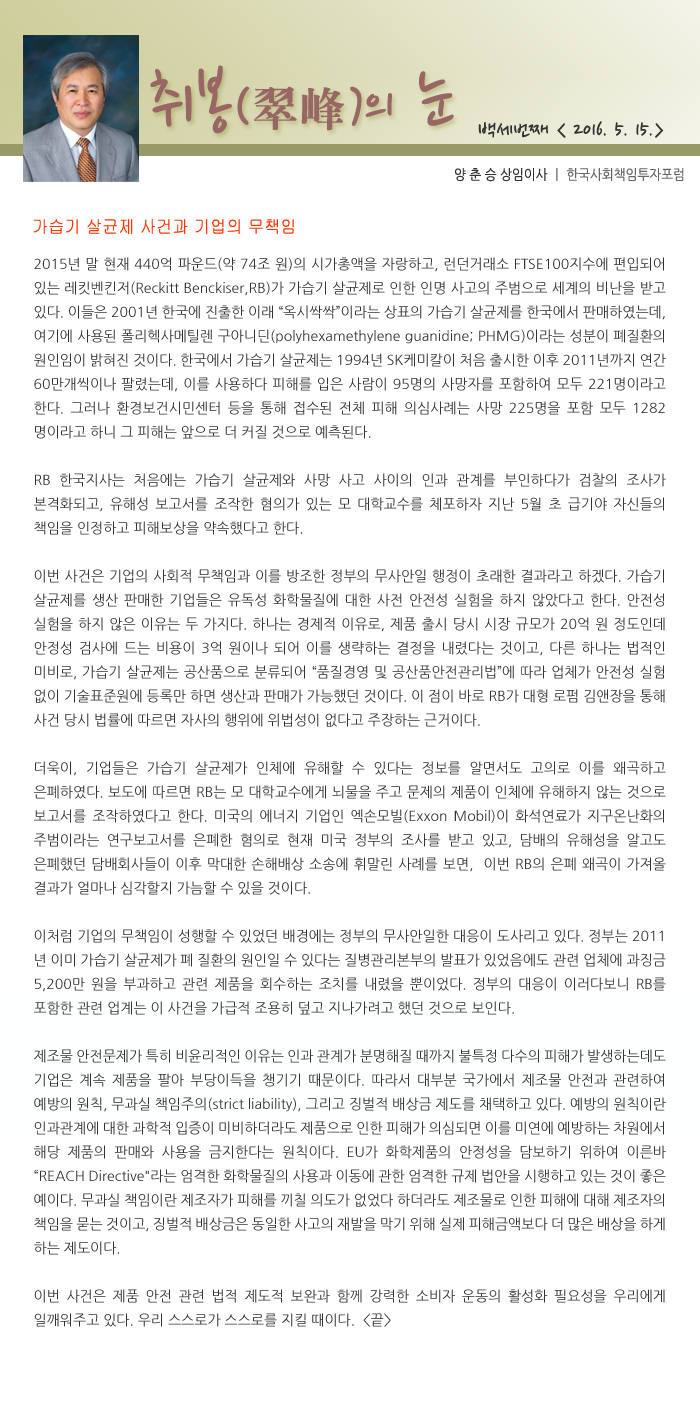
<style>
.page{position:relative;width:700px;height:1417px;background:#ffffff}
.page>*{position:absolute;margin:0}
.t1{font:77.5px "NanumPen";color:#996666}
.t2{font:60px "NanumPen";color:#996666}
.t3{font:48px "H2mjrE";color:#996666}
.t4{font:24px "NanumPen";color:#333333}
.t5{font:14px "NanumGothic";color:#666666;scale:0.9 1}
.t6{font:14px "NanumGothic";color:#333333;scale:0.9 1}
.t7{font:18px "Gulim";color:#ff3300;scale:0.9 1}
.t8{font:14px/24px "NanumGothic";color:#333333}
</style>
<div class="page">
<p class="t1" style="left:150px;top:65px;width:304px;height:69px">취봉<span class="t2">(</span><span class="t3">翠峰</span><span class="t2">)</span><span class="t2">의</span> 눈</p>
<p class="t4" style="left:478px;top:121px;width:186px;height:17px">백세번째 &lt; 2016. 5. 15.&gt;</p>
<p class="t5" style="left:455px;top:168px;width:229px;height:14px"><span class="t6">양 춘 승 상임이사 </span>ㅣ 한국사회책임투자포럼</p>
<p class="t7" style="left:33px;top:219px;width:261px;height:15px">가습기 살균제 사건과 기업의 무책임</p>
<p class="t8" style="left:34px;top:257px;width:632px;height:1070px;text-align:justify">2015년 말 현재 440억 파운드(약 74조 원)의 시가총액을 자랑하고, 런던거래소 FTSE100지수에 편입되어 있는 레킷벤킨저(Reckitt Benckiser,RB)가 가습기 살균제로 인한 인명 사고의 주범으로 세계의 비난을 받고 있다. 이들은 2001년 한국에 진출한 이래 “옥시싹싹”이라는 상표의 가습기 살균제를 한국에서 판매하였는데, 여기에 사용된 폴리헥사메틸렌 구아니딘(polyhexamethylene guanidine; PHMG)이라는 성분이 폐질환의 원인임이 밝혀진 것이다. 한국에서 가습기 살균제는 1994년 SK케미칼이 처음 출시한 이후 2011년까지 연간 60만개씩이나 팔렸는데, 이를 사용하다 피해를 입은 사람이 95명의 사망자를 포함하여 모두 221명이라고 한다. 그러나 환경보건시민센터 등을 통해 접수된 전체 피해 의심사례는 사망 225명을 포함 모두 1282명이라고 하니 그 피해는 앞으로 더 커질 것으로 예측된다.<br><br>RB 한국지사는 처음에는 가습기 살균제와 사망 사고 사이의 인과 관계를 부인하다가 검찰의 조사가 본격화되고, 유해성 보고서를 조작한 혐의가 있는 모 대학교수를 체포하자 지난 5월 초 급기야 자신들의 책임을 인정하고 피해보상을 약속했다고 한다. <br><br>이번 사건은 기업의 사회적 무책임과 이를 방조한 정부의 무사안일 행정이 초래한 결과라고 하겠다. 가습기 살균제를 생산 판매한 기업들은 유독성 화학물질에 대한 사전 안전성 실험을 하지 않았다고 한다. 안전성 실험을 하지 않은 이유는 두 가지다. 하나는 경제적 이유로, 제품 출시 당시 시장 규모가 20억 원 정도인데 안정성 검사에 드는 비용이 3억 원이나 되어 이를 생략하는 결정을 내렸다는 것이고, 다른 하나는 법적인 미비로, 가습기 살균제는 공산품으로 분류되어 “품질경영 및 공산품안전관리법”에 따라 업체가 안전성 실험 없이 기술표준원에 등록만 하면 생산과 판매가 가능했던 것이다. 이 점이 바로 RB가 대형 로펌 김앤장을 통해 사건 당시 법률에 따르면 자사의 행위에 위법성이 없다고 주장하는 근거이다. <br><br>더욱이, 기업들은 가습기 살균제가 인체에 유해할 수 있다는 정보를 알면서도 고의로 이를 왜곡하고 은폐하였다. 보도에 따르면 RB는 모 대학교수에게 뇌물을 주고 문제의 제품이 인체에 유해하지 않는 것으로 보고서를 조작하였다고 한다. 미국의 에너지 기업인 엑손모빌(Exxon Mobil)이 화석연료가 지구온난화의 주범이라는 연구보고서를 은폐한 혐의로 현재 미국 정부의 조사를 받고 있고, 담배의 유해성을 알고도 은폐했던 담배회사들이 이후 막대한 손해배상 소송에 휘말린 사례를 보면,  이번 RB의 은폐 왜곡이 가져올 결과가 얼마나 심각할지 가늠할 수 있을 것이다.<br><br>이처럼 기업의 무책임이 성행할 수 있었던 배경에는 정부의 무사안일한 대응이 도사리고 있다. 정부는 2011년 이미 가습기 살균제가 폐 질환의 원인일 수 있다는 질병관리본부의 발표가 있었음에도 관련 업체에 과징금 5,200만 원을 부과하고 관련 제품을 회수하는 조치를 내렸을 뿐이었다. 정부의 대응이 이러다보니 RB를 포함한 관련 업계는 이 사건을 가급적 조용히 덮고 지나가려고 했던 것으로 보인다.<br><br>제조물 안전문제가 특히 비윤리적인 이유는 인과 관계가 분명해질 때까지 불특정 다수의 피해가 발생하는데도 기업은 계속 제품을 팔아 부당이득을 챙기기 때문이다. 따라서 대부분 국가에서 제조물 안전과 관련하여 예방의 원칙, 무과실 책임주의(strict liability), 그리고 징벌적 배상금 제도를 채택하고 있다. 예방의 원칙이란 인과관계에 대한 과학적 입증이 미비하더라도 제품으로 인한 피해가 의심되면 이를 미연에 예방하는 차원에서 해당 제품의 판매와 사용을 금지한다는 원칙이다. EU가 화학제품의 안정성을 담보하기 위하여 이른바 “REACH Directive"라는 엄격한 화학물질의 사용과 이동에 관한 엄격한 규제 법안을 시행하고 있는 것이 좋은 예이다. 무과실 책임이란 제조자가 피해를 끼칠 의도가 없었다 하더라도 제조물로 인한 피해에 대해 제조자의 책임을 묻는 것이고, 징벌적 배상금은 동일한 사고의 재발을 막기 위해 실제 피해금액보다 더 많은 배상을 하게 하는 제도이다.<br><br>이번 사건은 제품 안전 관련 법적 제도적 보완과 함께 강력한 소비자 운동의 활성화 필요성을 우리에게 일깨워주고 있다. 우리 스스로가 스스로를 지킬 때이다.  &lt;끝&gt;</p>
</div>
